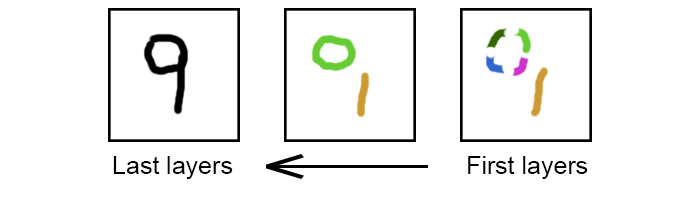
<style>
.page{position:relative;width:700px;height:200px;background:#ffffff}
.page>*{position:absolute;margin:0}
.t1{font:25px "ArialMT";color:#000000}
</style>
<div class="page">
<p class="t1" style="left:113px;top:156px;width:120px;height:23px">Last layers</p>
<p class="t1" style="left:468px;top:156px;width:120px;height:23px">First layers</p>
</div>
